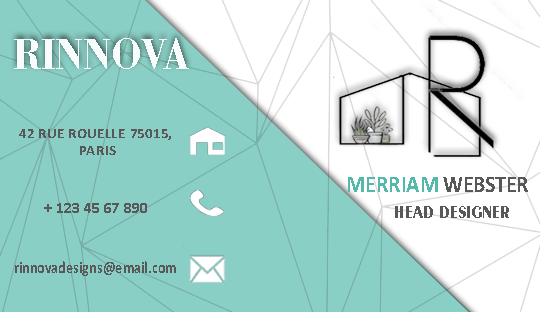
<style>
.page{position:relative;width:540px;height:312px;background:#8acfc5}
.page>*{position:absolute;margin:0}
.t1{font:45.5px "BodoniBT-Bold";color:#f9fcfc;scale:0.88 1}
.t2{font:13.9px "Calibri-Bold";color:#585858;scale:1.11 1}
.t3{font:24px "Calibri-Bold";color:#54b9aa;scale:0.9 1}
.t4{font:24px "Calibri-Bold";color:#585858;scale:0.9 1}
.t5{font:16px "Calibri-Bold";color:#585858}
.t6{font:18px "Exotic350BT-Bold";color:#585858;scale:0.83 1}
.t7{font:17.2px "Calibri-Bold";color:#585858;scale:0.83 1}
</style>
<div class="page">
<p class="t1" style="left:14px;top:38px;width:175px;height:31px">RINNOVA</p>
<p class="t2" style="left:19px;top:129px;width:152px;height:26px;text-align:center">42 RUE ROUELLE 75015, <br>PARIS</p>
<p class="t3" style="left:348px;top:177px;width:180px;height:15px">MERRIAM <span class="t4">WEBSTER</span></p>
<p class="t5" style="left:44px;top:203px;width:103px;height:10px">+ 123 45 67 890</p>
<p class="t6" style="left:395px;top:206px;width:114px;height:12px">HEAD DESIGNER</p>
<p class="t7" style="left:15px;top:261px;width:161px;height:15px">rinnovadesigns@email.com</p>
</div>
